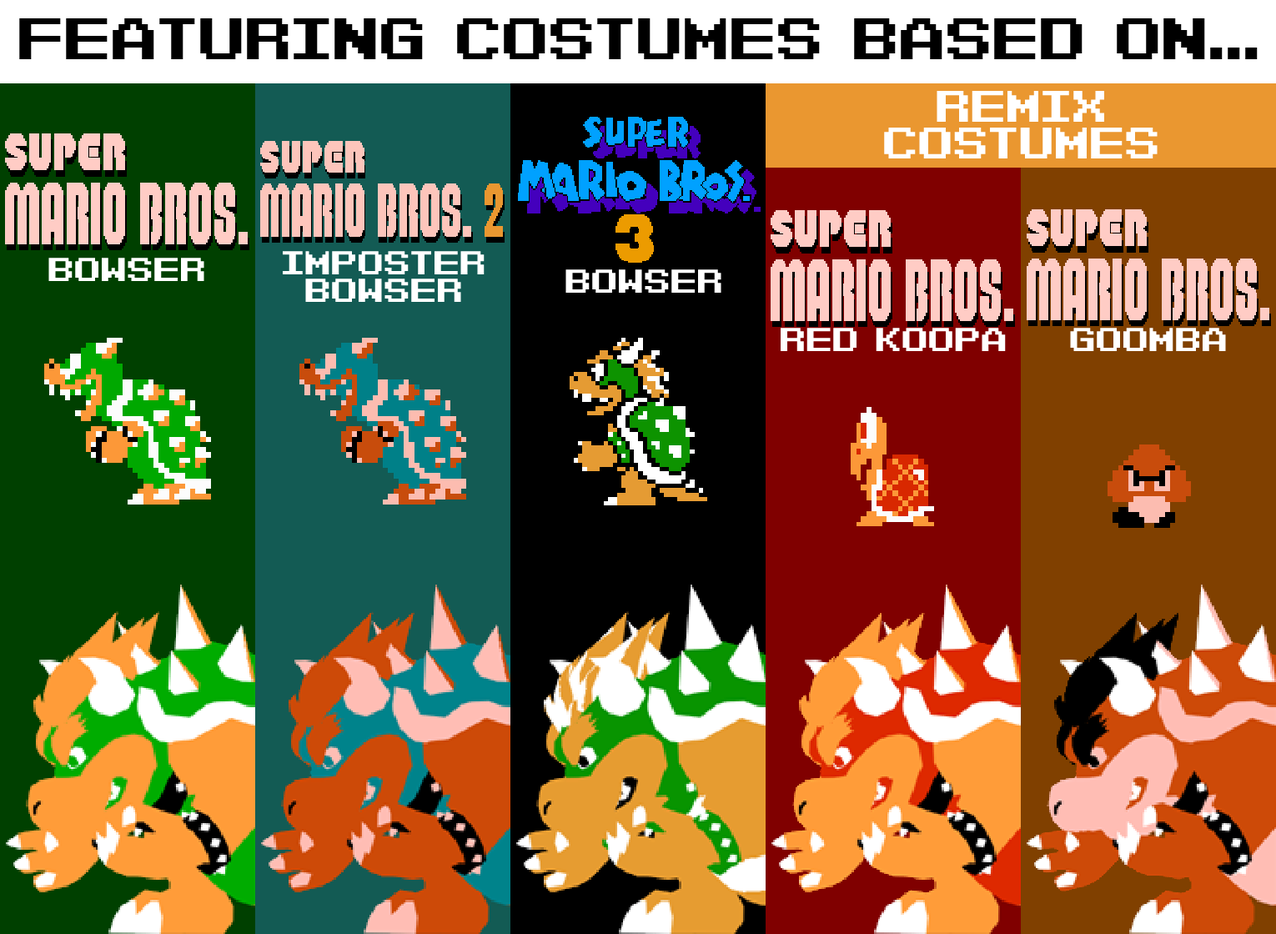
<style>
.page{position:relative;width:1276px;height:934px}
.page>*{position:absolute;margin:0}
.t1{font:40.9px "Barcade-Brawl";color:#000000}
.t2{font:30.8px "Barcade-Brawl";color:#ffffff}
.t3{font:23.1px "Barcade-Brawl";color:#ffffff}
</style>
<div class="page">
<p class="t1" style="left:19px;top:18px;width:1239px;height:41px">FEATURING COSTUMES BASED ON...</p>
<p class="t2" style="left:884px;top:91px;width:274px;height:67px;text-align:center">REMIX<br>Costumes</p>
<p class="t3" style="left:48px;top:258px;width:156px;height:24px">BOWSER</p>
<p class="t3" style="left:282px;top:251px;width:203px;height:52px;text-align:center">IMPOSTER<br>BOWSER</p>
<p class="t3" style="left:566px;top:269px;width:156px;height:25px">BOWSER</p>
<p class="t3" style="left:781px;top:328px;width:225px;height:24px">RED KOOPA</p>
<p class="t3" style="left:1070px;top:328px;width:156px;height:24px">GOOMBA</p>
</div>
